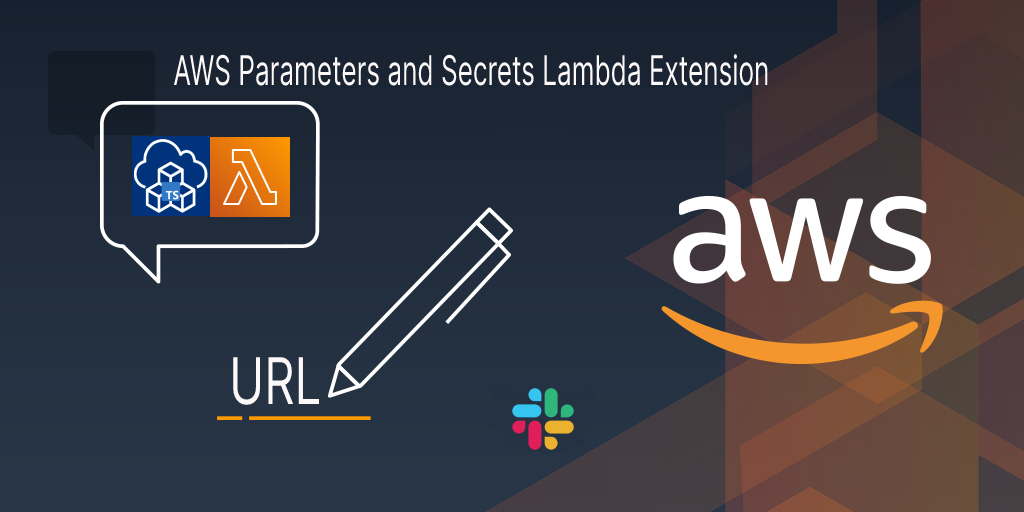
<style>
.page{position:relative;width:1024px;height:512px}
.page>*{position:absolute;margin:0}
.t1{font:41.1px "Inter-Regular";color:#fdf9f9;scale:0.64 1}
.t2{font:64.4px "Inter-Regular";color:#fdf9f9;scale:0.74 1}
</style>
<div class="page">
<p class="t1" style="left:174px;top:54px;width:594px;height:32px">AWS Parameters and Secrets Lambda Extension</p>
<p class="t2" style="left:233px;top:357px;width:87px;height:48px">URL</p>
</div>
